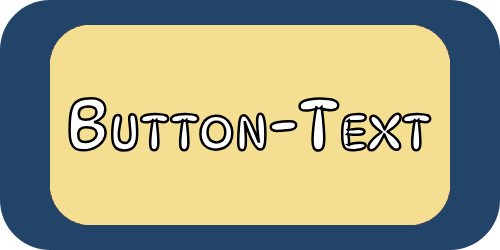
<style>
.page{position:relative;width:500px;height:250px;background:#f3de91}
.page>*{position:absolute;margin:0}
.t1{font:70px "DynaPuff-Regular";font-variant:small-caps}
</style>
<div class="page">
<p class="t1" style="left:63px;top:92px;width:374px;height:65px">Button-Text</p>
</div>
